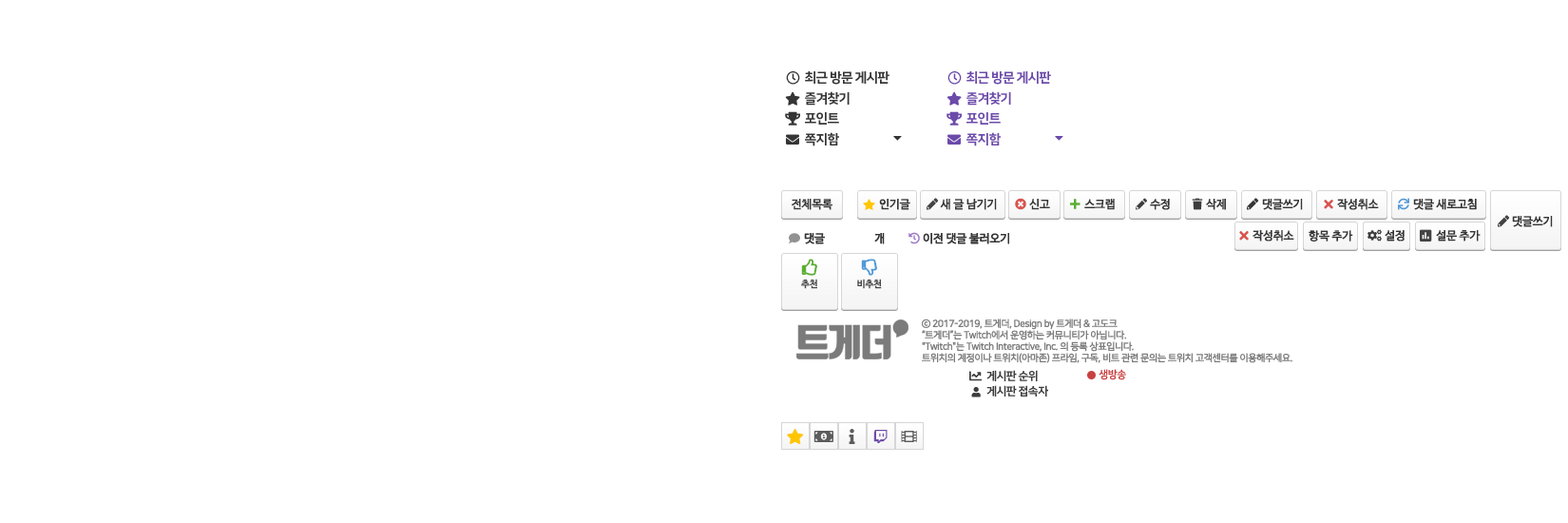
<style>
.page{position:relative;width:1568px;height:523px;background:#ffffff}
.page>*{position:absolute;margin:0}
.t1{font:13.3px "NanumSquareEB";letter-spacing:-0.06em;color:#353535}
.t2{font:13.3px "NanumSquareEB";letter-spacing:-0.06em;color:#6b4aa9}
.t3{font:11.4px "NanumBarunGothicOTF";letter-spacing:-0.02em;color:#353535;font-weight:bold}
.t4{font:9.5px "NanumBarunGothicOTFBold";letter-spacing:-0.02em;color:#474747}
.t5{font:9.5px "NanumSquareR";letter-spacing:-0.05em;color:#7b7b7b;font-weight:bold}
.t6{font:11.4px "NanumSquareEB";letter-spacing:-0.05em;color:#3d3d3d}
.t7{font:10.5px "NanumSquareEB";letter-spacing:-0.05em;color:#c84040}
</style>
<div class="page">
<p class="t1" style="left:805px;top:71px;width:84px;height:14px">최근 방문 게시판</p>
<p class="t2" style="left:966px;top:71px;width:85px;height:14px">최근 방문 게시판</p>
<p class="t1" style="left:805px;top:91px;width:45px;height:14px">즐겨찾기</p>
<p class="t2" style="left:966px;top:91px;width:45px;height:14px">즐겨찾기</p>
<p class="t1" style="left:805px;top:112px;width:34px;height:12px">포인트</p>
<p class="t2" style="left:966px;top:112px;width:35px;height:12px">포인트</p>
<p class="t1" style="left:805px;top:132px;width:34px;height:14px">쪽지함</p>
<p class="t2" style="left:966px;top:132px;width:35px;height:14px">쪽지함</p>
<p class="t3" style="left:792px;top:199px;width:40px;height:11px">전체목록</p>
<p class="t3" style="left:879px;top:199px;width:31px;height:11px">인기글</p>
<p class="t3" style="left:940px;top:199px;width:57px;height:11px">새 글 남기기</p>
<p class="t3" style="left:1029px;top:199px;width:21px;height:11px">신고</p>
<p class="t3" style="left:1084px;top:199px;width:31px;height:11px">스크랩</p>
<p class="t3" style="left:1150px;top:199px;width:20px;height:11px">수정</p>
<p class="t3" style="left:1206px;top:199px;width:20px;height:11px">삭제</p>
<p class="t3" style="left:1262px;top:199px;width:41px;height:11px">댓글쓰기</p>
<p class="t3" style="left:1337px;top:199px;width:42px;height:11px">작성취소</p>
<p class="t3" style="left:1413px;top:199px;width:64px;height:11px">댓글 새로고침</p>
<p class="t3" style="left:1512px;top:216px;width:41px;height:11px">댓글쓰기</p>
<p class="t3" style="left:804px;top:233px;width:81px;height:11px">댓글                   개</p>
<p class="t3" style="left:923px;top:233px;width:86px;height:11px">이전 댓글 불러오기</p>
<p class="t3" style="left:1252px;top:230px;width:42px;height:11px">작성취소</p>
<p class="t3" style="left:1309px;top:230px;width:44px;height:11px">항목 추가</p>
<p class="t3" style="left:1385px;top:230px;width:20px;height:11px">설정</p>
<p class="t3" style="left:1436px;top:230px;width:45px;height:11px">설문 추가</p>
<p class="t4" style="left:801px;top:278px;width:16px;height:11px">추천</p>
<p class="t4" style="left:857px;top:278px;width:25px;height:11px">비추천</p>
<p class="t5" style="left:922px;top:318px;width:370px;height:45px">ⓒ 2017-2019, 트게더, Design by 트게더 &amp; 고도크<br>“트게더”는 Twitch에서 운영하는 커뮤니티가 아닙니다.<br>"Twitch"는 Twitch Interactive, Inc. 의 등록 상표입니다.<br>트위치의 계정이나 트위치(아마존) 프라임, 구독, 비트 관련 문의는 트위치 고객센터를 이용해주세요.</p>
<p class="t6" style="left:986px;top:370px;width:52px;height:11px">게시판 순위</p>
<p class="t7" style="left:1099px;top:369px;width:27px;height:11px">생방송</p>
<p class="t6" style="left:986px;top:385px;width:62px;height:11px">게시판 접속자</p>
</div>
